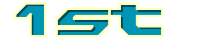
<style>
.page{position:relative;width:200px;height:40px;background:#ffffff}
.page>*{position:absolute;margin:0}
.t1{font:52px "Extremist";letter-spacing:-0.45em;color:#0094b5}
.t2{font:52px "Extremist";letter-spacing:-0.375em;color:#0094b5}
</style>
<div class="page">
<p class="t1" style="left:16px;top:4px;width:146px;height:31px">1s<span class="t2">t</span></p>
</div>
